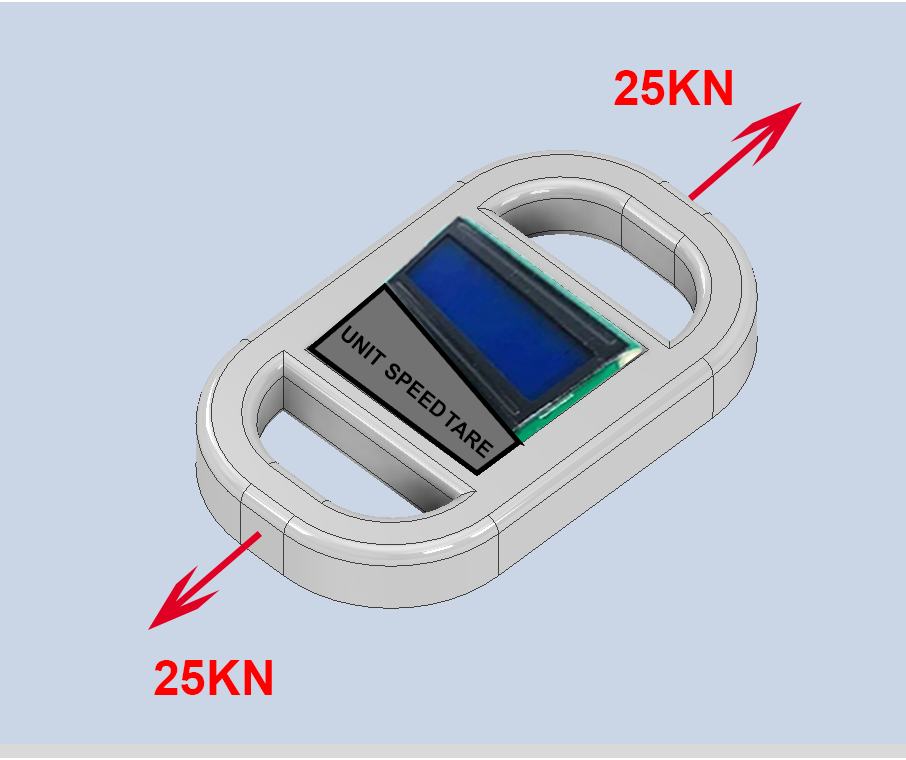
<style>
.page{position:relative;width:906px;height:760px;background:#cad5e5}
.page>*{position:absolute;margin:0}
.t1{font:48px "Arial-BoldMT";color:#ff0000}
.t2{font:21.9px "Arial-BoldMT";color:#000000}
</style>
<div class="page">
<p class="t1" style="left:614px;top:70px;width:118px;height:35px">25KN</p>
<p class="t2" style="left:341px;top:325px;width:46px;height:41px;rotate:40deg">UNIT</p>
<p class="t2" style="left:385px;top:363px;width:61px;height:54px;rotate:39deg">SPEED</p>
<p class="t2" style="left:444px;top:410px;width:50px;height:49px;rotate:40deg">TARE</p>
<p class="t1" style="left:154px;top:660px;width:118px;height:35px">25KN</p>
</div>
